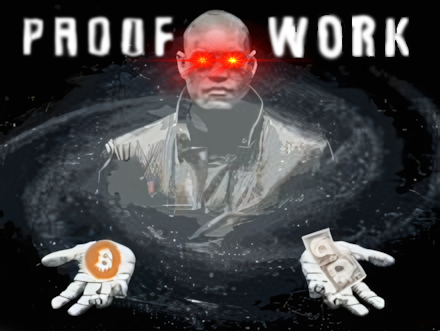
<style>
.page{position:relative;width:440px;height:331px}
.page>*{position:absolute;margin:0}
.t1{font:52.4px "Impact";letter-spacing:0.1em}
</style>
<div class="page">
<p class="t1" style="left:22px;top:15px;width:389px;height:43px">PROOF OF WORK</p>
</div>
